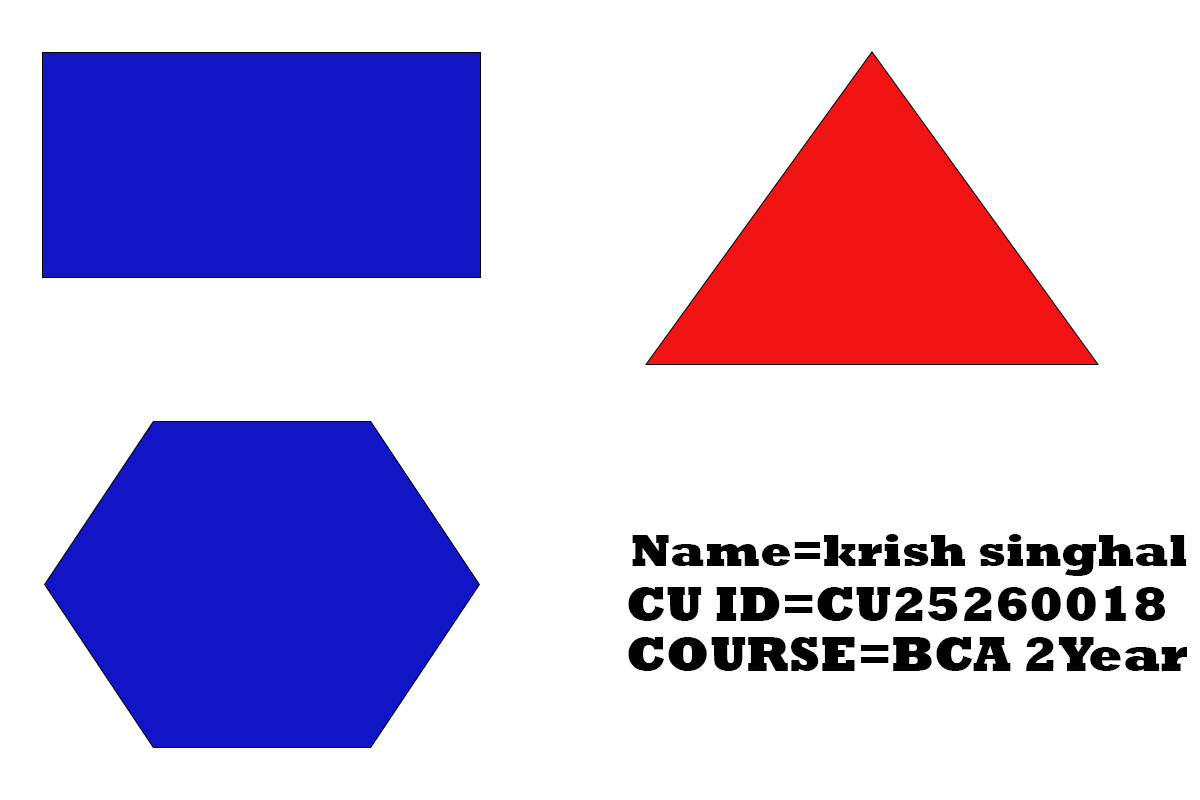
<style>
.page{position:relative;width:1200px;height:800px;background:#ffffff}
.page>*{position:absolute;margin:0}
.t1{font:46px "Rockwell-ExtraBold";color:#000000}
.t2{font:50px "Rockwell-ExtraBold";color:#000000}
</style>
<div class="page">
<p class="t1" style="left:632px;top:534px;width:555px;height:42px">Name=krish singhal</p>
<p class="t2" style="left:628px;top:586px;width:537px;height:35px">CU ID=CU25260018</p>
<p class="t2" style="left:628px;top:637px;width:559px;height:34px">COURSE=BCA 2Year</p>
</div>
